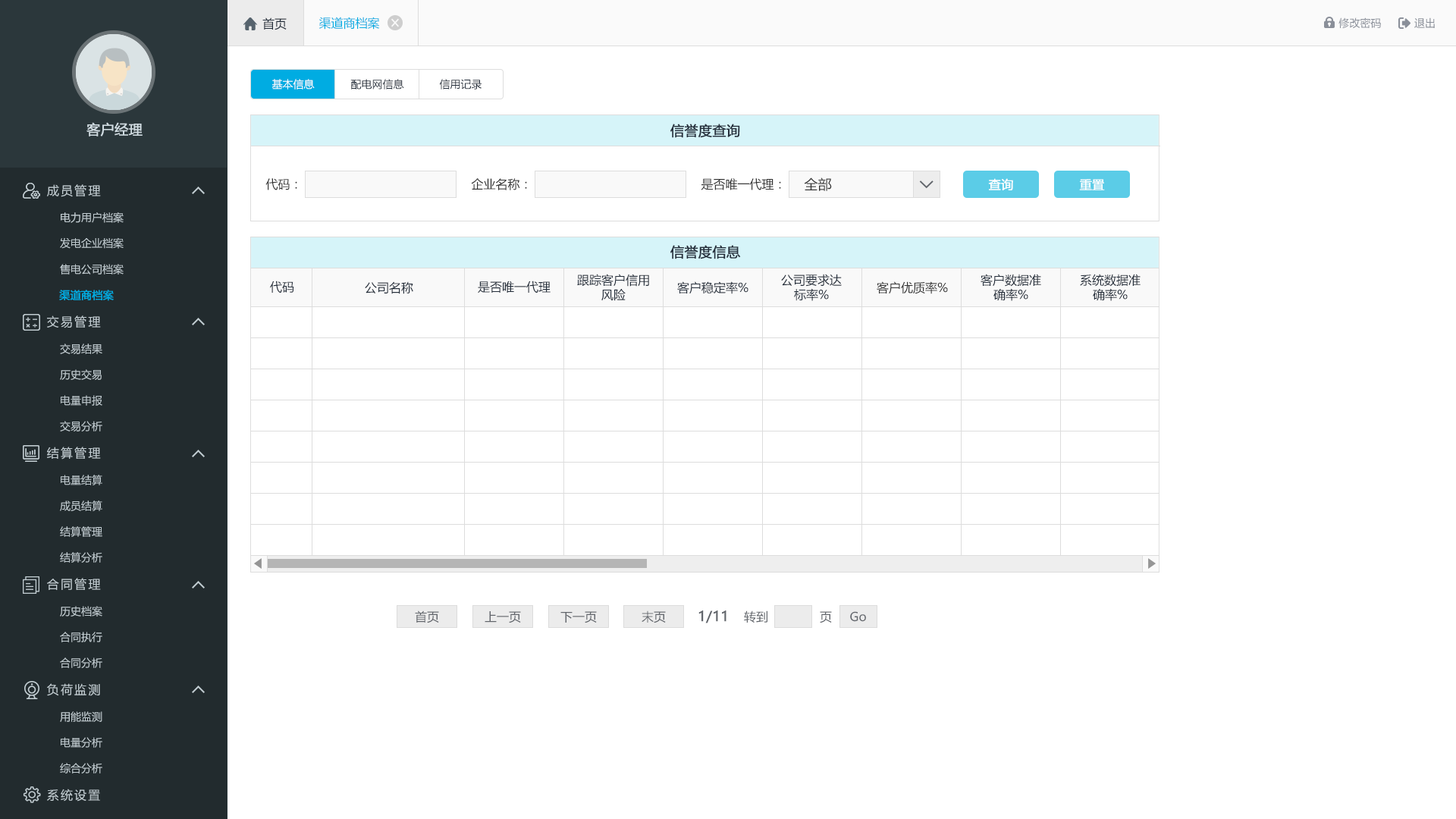
<style>
.page{position:relative;width:1456px;height:819px;background:#ffffff}
.page>*{position:absolute;margin:0}
.t1{font:12.1px "MicrosoftYaHei";color:#242e3b}
.t2{font:12.1px "MicrosoftYaHei";color:#00ace2}
.t3{font:10.6px "MicrosoftYaHei";color:#8a8f99}
.t4{font:10.6px "MicrosoftYaHei";color:#ffffff}
.t5{font:10.6px "MicrosoftYaHei";color:#242e3b}
.t6{font:13.6px "MicrosoftYaHei";color:#d1dce2;font-weight:bold}
.t7{font:13.6px "MicrosoftYaHei";color:#242e3b;font-weight:bold}
.t8{font:12.1px "MicrosoftYaHei";letter-spacing:0.14em;color:#c2cdd2}
.t9{font:12.1px "MicrosoftYaHei";color:#333333}
.t10{font:13.6px "MicrosoftYaHei";color:#333333}
.t11{font:12.1px "MicrosoftYaHei";color:#ffffff;font-weight:bold}
.t12{font:10.6px "MicrosoftYaHei";color:#c2cdd2}
.t13{font:10.6px "MicrosoftYaHei";color:#00ace2;font-weight:bold}
.t14{font:12.1px "MicrosoftYaHei";color:#61656b}
.t15{font:13.6px "MicrosoftYaHei";color:#61656b;font-weight:bold}
</style>
<div class="page">
<p class="t1" style="left:262px;top:17px;width:25px;height:13px">首页</p>
<p class="t2" style="left:318px;top:17px;width:62px;height:13px">渠道商档案</p>
<p class="t3" style="left:1338px;top:17px;width:43px;height:12px">修改密码</p>
<p class="t3" style="left:1414px;top:17px;width:21px;height:11px">退出</p>
<p class="t4" style="left:271px;top:79px;width:44px;height:10px">基本信息</p>
<p class="t5" style="left:350px;top:79px;width:54px;height:10px">配电网信息</p>
<p class="t5" style="left:439px;top:79px;width:43px;height:10px">信用记录</p>
<p class="t6" style="left:86px;top:122px;width:57px;height:14px">客户经理</p>
<p class="t7" style="left:670px;top:124px;width:70px;height:14px">信誉度查询</p>
<p class="t8" style="left:47px;top:184px;width:54px;height:13px">成员管理</p>
<p class="t9" style="left:265px;top:178px;width:32px;height:12px">代码：</p>
<p class="t9" style="left:471px;top:178px;width:56px;height:12px">企业名称：</p>
<p class="t9" style="left:701px;top:178px;width:80px;height:12px">是否唯一代理：</p>
<p class="t10" style="left:804px;top:177px;width:28px;height:14px">全部</p>
<p class="t11" style="left:988px;top:178px;width:25px;height:12px">查询</p>
<p class="t11" style="left:1079px;top:179px;width:26px;height:11px">重置</p>
<p class="t12" style="left:61px;top:212px;width:63px;height:11px">电力用户档案</p>
<p class="t12" style="left:60px;top:237px;width:64px;height:12px">发电企业档案</p>
<p class="t7" style="left:670px;top:245px;width:71px;height:14px">信誉度信息</p>
<p class="t12" style="left:60px;top:264px;width:64px;height:11px">售电公司档案</p>
<p class="t1" style="left:270px;top:281px;width:24px;height:12px">代码</p>
<p class="t1" style="left:365px;top:281px;width:48px;height:13px">公司名称</p>
<p class="t1" style="left:478px;top:281px;width:73px;height:12px">是否唯一代理</p>
<p class="t1" style="left:577px;top:274px;width:72px;height:27px;text-align:center">跟踪客户信用<br>风险</p>
<p class="t1" style="left:677px;top:281px;width:71px;height:13px">客户稳定率%</p>
<p class="t1" style="left:781px;top:274px;width:61px;height:27px;text-align:center">公司要求达<br>标率%</p>
<p class="t9" style="left:877px;top:281px;width:71px;height:13px">客户优质率%</p>
<p class="t1" style="left:981px;top:274px;width:60px;height:27px;text-align:center">客户数据准<br>确率%</p>
<p class="t1" style="left:1080px;top:274px;width:61px;height:27px;text-align:center">系统数据准<br>确率%</p>
<p class="t13" style="left:59px;top:290px;width:55px;height:11px">渠道商档案</p>
<p class="t8" style="left:47px;top:315px;width:54px;height:13px">交易管理</p>
<p class="t12" style="left:60px;top:344px;width:42px;height:10px">交易结果</p>
<p class="t12" style="left:60px;top:369px;width:42px;height:11px">历史交易</p>
<p class="t12" style="left:61px;top:395px;width:41px;height:11px">电量申报</p>
<p class="t12" style="left:60px;top:421px;width:42px;height:10px">交易分析</p>
<p class="t8" style="left:47px;top:447px;width:54px;height:13px">结算管理</p>
<p class="t12" style="left:61px;top:475px;width:41px;height:10px">电量结算</p>
<p class="t12" style="left:60px;top:500px;width:42px;height:11px">成员结算</p>
<p class="t12" style="left:60px;top:526px;width:42px;height:11px">结算管理</p>
<p class="t12" style="left:60px;top:552px;width:42px;height:11px">结算分析</p>
<p class="t8" style="left:47px;top:578px;width:54px;height:12px">合同管理</p>
<p class="t12" style="left:60px;top:606px;width:42px;height:11px">历史档案</p>
<p class="t14" style="left:415px;top:610px;width:24px;height:13px">首页</p>
<p class="t14" style="left:485px;top:611px;width:36px;height:12px">上一页</p>
<p class="t14" style="left:560px;top:611px;width:37px;height:12px">下一页</p>
<p class="t14" style="left:642px;top:610px;width:24px;height:13px">末页</p>
<p class="t15" style="left:698px;top:610px;width:28px;height:13px">1/11</p>
<p class="t14" style="left:744px;top:610px;width:23px;height:13px">转到</p>
<p class="t14" style="left:820px;top:611px;width:12px;height:12px">页</p>
<p class="t14" style="left:850px;top:611px;width:16px;height:11px">Go</p>
<p class="t12" style="left:60px;top:632px;width:42px;height:10px">合同执行</p>
<p class="t12" style="left:60px;top:657px;width:42px;height:11px">合同分析</p>
<p class="t8" style="left:47px;top:683px;width:53px;height:13px">负荷监测</p>
<p class="t12" style="left:60px;top:711px;width:42px;height:11px">用能监测</p>
<p class="t12" style="left:61px;top:737px;width:41px;height:11px">电量分析</p>
<p class="t12" style="left:60px;top:763px;width:42px;height:10px">综合分析</p>
<p class="t8" style="left:47px;top:789px;width:53px;height:13px">系统设置</p>
</div>
